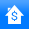
<style>
.page{position:relative;width:29px;height:29px;background:#007aff}
.page>*{position:absolute;margin:0}
.t1{font:11.3px "Roboto-Regular";color:#007aff;scale:1.15 1}
</style>
<div class="page">
<p class="t1" style="left:11px;top:10px;width:7px;height:11px">$</p>
</div>
